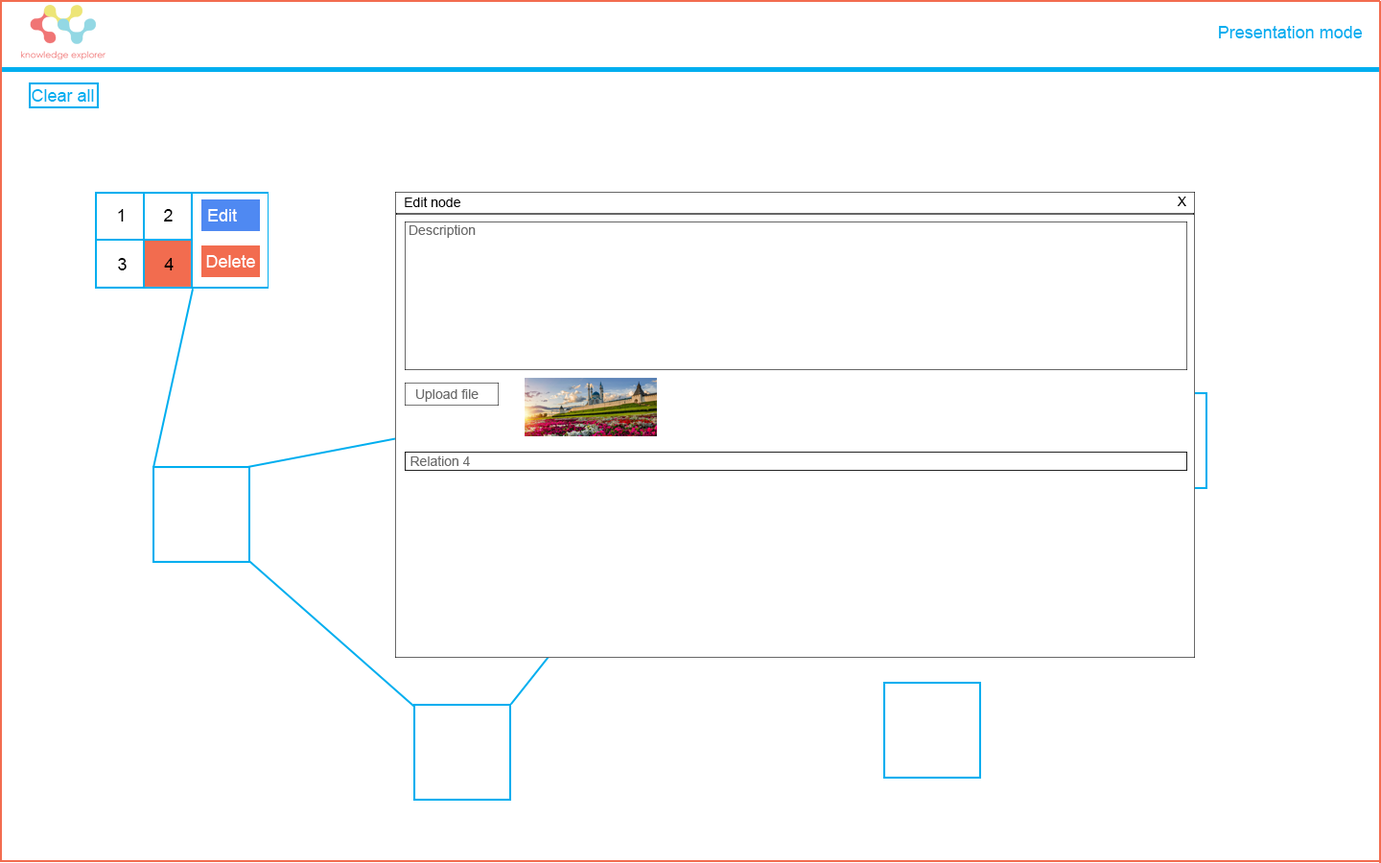
<style>
.page{position:relative;width:1381px;height:863px;background:#ffffff}
.page>*{position:absolute;margin:0}
.t1{font:17.3px "ArialMT";color:#00aeef}
.t2{font:13.4px "ArialMT";color:#000000}
.t3{font:17.3px "ArialMT";color:#000000}
.t4{font:17.3px "ArialMT";color:#ffffff}
.t5{font:13.4px "ArialMT";color:#6a6a6a}
</style>
<div class="page">
<p class="t1" style="left:1219px;top:26px;width:144px;height:12px">Presentation mode</p>
<p class="t1" style="left:32px;top:89px;width:62px;height:13px">Clear all</p>
<p class="t2" style="left:405px;top:197px;width:55px;height:10px">Edit node</p>
<p class="t2" style="left:1177px;top:197px;width:10px;height:9px">X</p>
<p class="t3" style="left:118px;top:209px;width:6px;height:13px">1</p>
<p class="t3" style="left:164px;top:209px;width:9px;height:13px">2</p>
<p class="t4" style="left:208px;top:209px;width:29px;height:13px">Edit</p>
<p class="t5" style="left:410px;top:224px;width:66px;height:14px">Description</p>
<p class="t4" style="left:206px;top:255px;width:49px;height:13px">Delete</p>
<p class="t3" style="left:118px;top:258px;width:9px;height:12px">3</p>
<p class="t3" style="left:164px;top:258px;width:10px;height:12px">4</p>
<p class="t5" style="left:416px;top:389px;width:63px;height:13px">Upload file</p>
<p class="t5" style="left:411px;top:456px;width:59px;height:10px">Relation 4</p>
</div>
